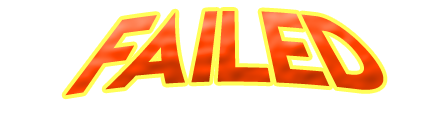
<style>
.page{position:relative;width:448px;height:124px;background:#ffffff}
.page>*{position:absolute;margin:0}
.t1{font:99.7px "LemonMilk"}
</style>
<div class="page">
<p class="t1" style="left:65px;top:11px;width:319px;height:85px">Failed</p>
</div>
